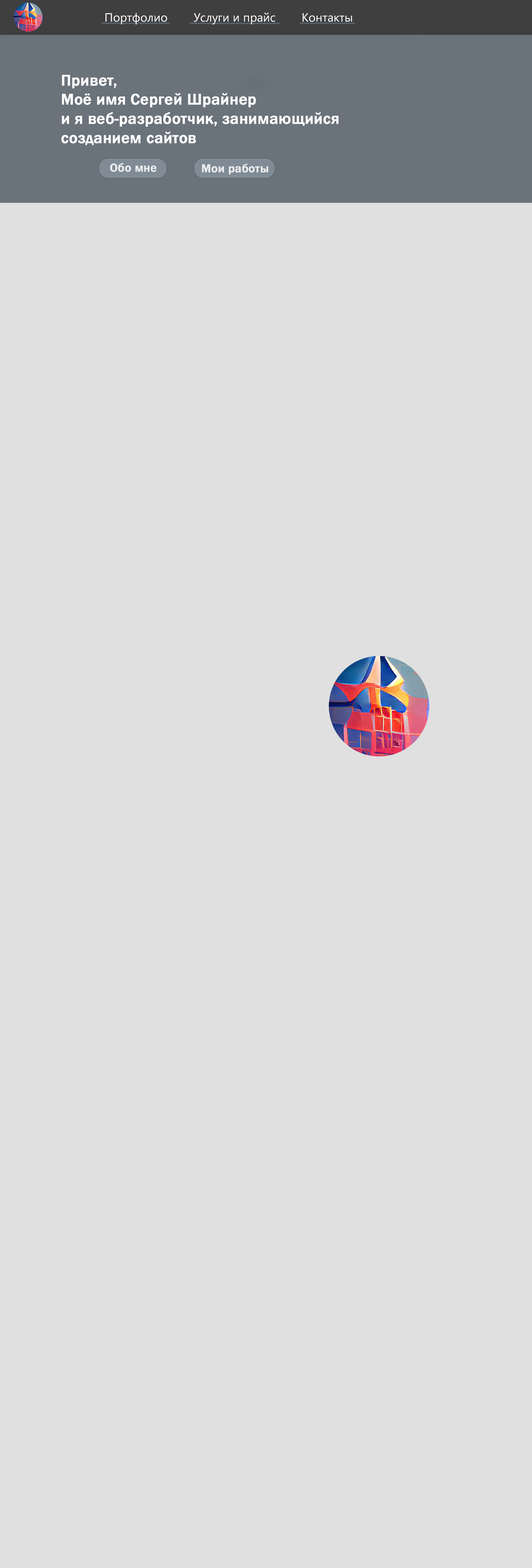
<style>
.page{position:relative;width:532px;height:1568px;background:#e0e0e0}
.page>*{position:absolute;margin:0}
.t1{font:12px "SegoeUI";color:#ffffff}
.t2{font:16px "FranklinGothic-Medium";color:#ffffff;font-weight:bold}
.t3{font:12px "FranklinGothic-Medium";color:#eeeff0;font-weight:bold}
</style>
<div class="page">
<p class="t1" style="left:105px;top:13px;width:62px;height:12px">Портфолио</p>
<p class="t1" style="left:194px;top:13px;width:81px;height:12px">Услуги и прайс</p>
<p class="t1" style="left:303px;top:13px;width:49px;height:9px">Контакты</p>
<p class="t2" style="left:61px;top:75px;width:277px;height:70px">Привет,<br>Моё имя Сергей Шрайнер<br>и я веб-разработчик, занимающийся созданием сайтов</p>
<p class="t3" style="left:110px;top:163px;width:47px;height:9px">Обо мне</p>
<p class="t3" style="left:202px;top:164px;width:66px;height:11px">Мои работы</p>
</div>
